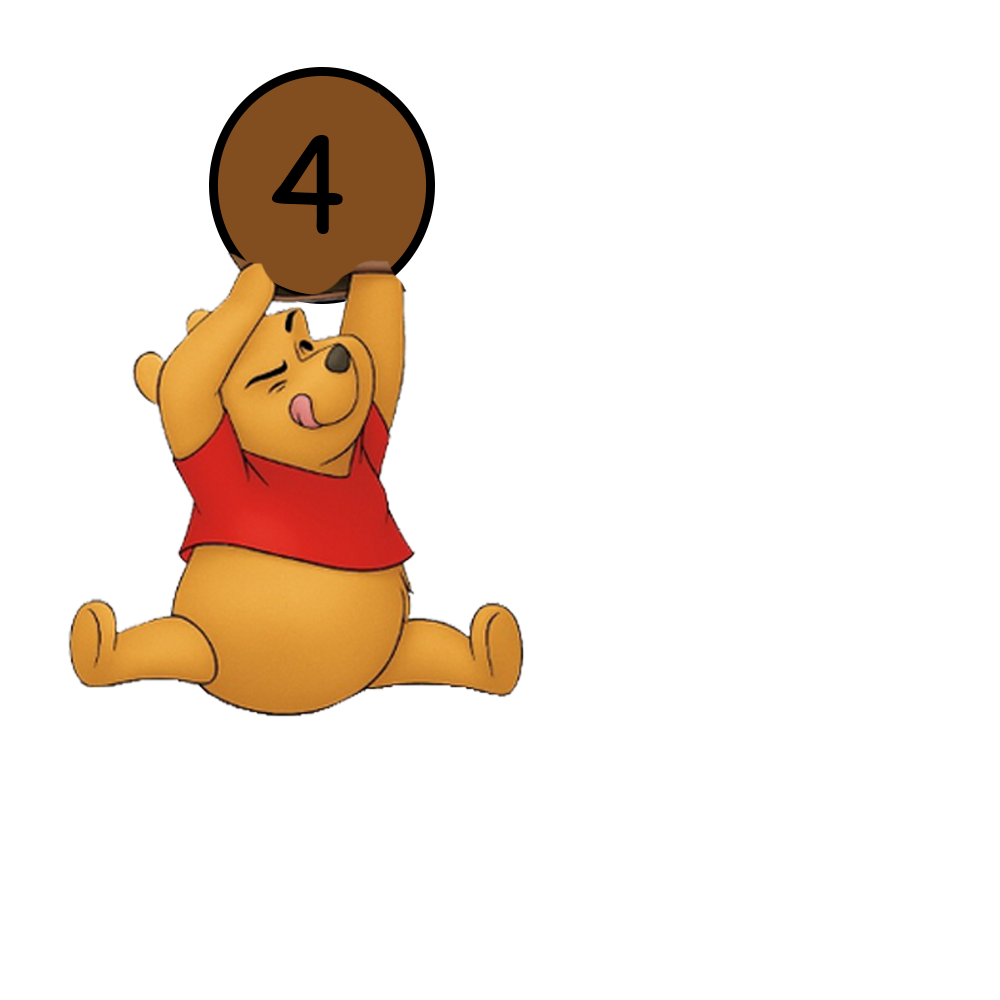
<style>
.page{position:relative;width:1000px;height:1000px;background:#ffffff}
.page>*{position:absolute;margin:0}
.t1{font:126.8px "ComicSansMS";color:#000000}
</style>
<div class="page">
<p class="t1" style="left:271px;top:135px;width:72px;height:99px">4</p>
</div>
